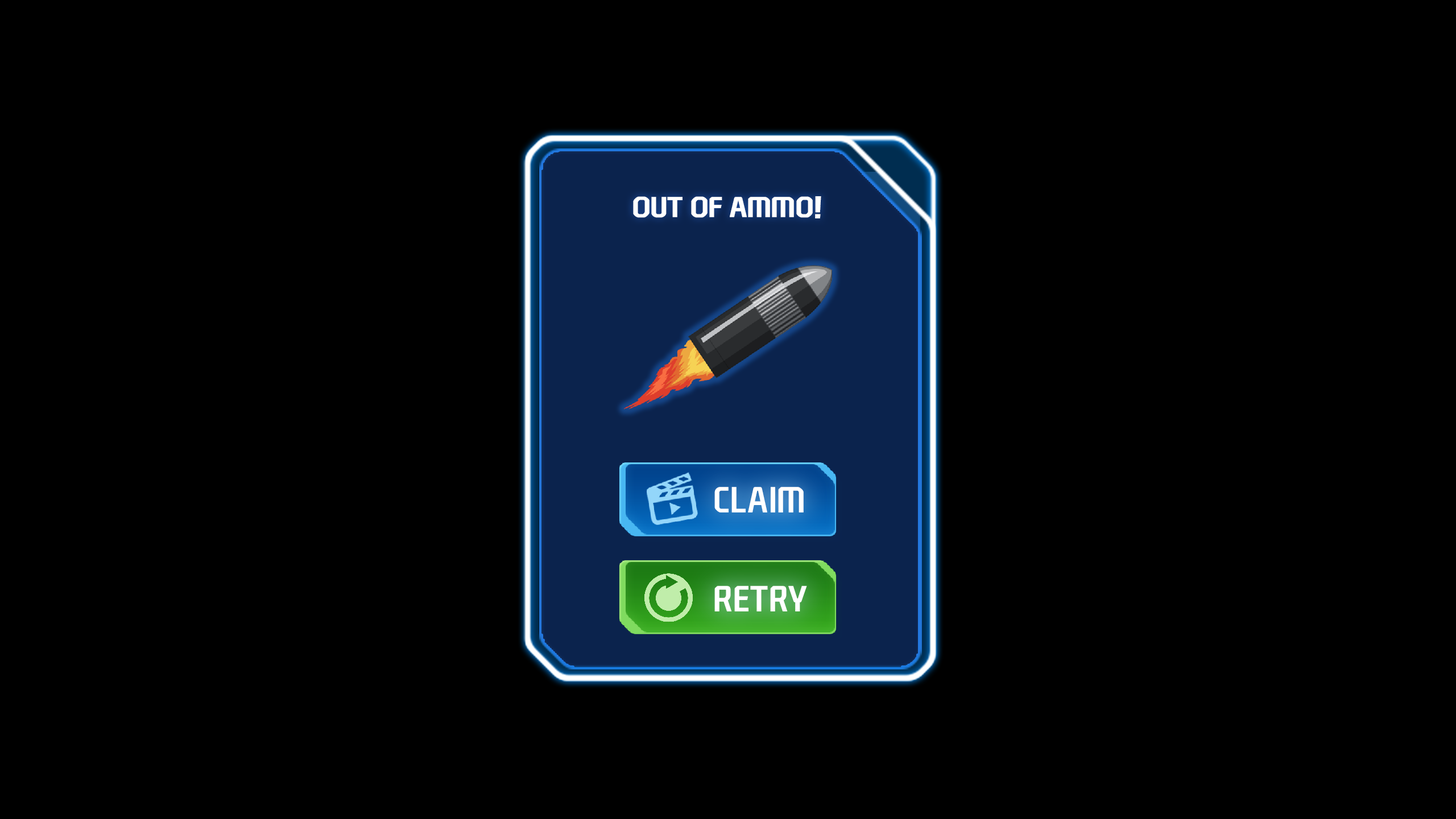
<style>
.page{position:relative;width:1456px;height:819px;background:#000000}
.page>*{position:absolute;margin:0}
.t1{font:27.3px "NEXONFootballGothicB";letter-spacing:-0.02em;color:#ffffff;text-transform:uppercase;font-weight:bold}
.t2{font:35px "NEXONFootballGothicB";color:#ffffff;text-transform:uppercase;scale:0.92 1}
</style>
<div class="page">
<p class="t1" style="left:633px;top:196px;width:188px;height:22px">out of ammo!</p>
<p class="t2" style="left:714px;top:487px;width:90px;height:25px">Claim</p>
<p class="t2" style="left:714px;top:586px;width:93px;height:25px">retry</p>
</div>
